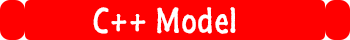
<style>
.page{position:relative;width:350px;height:40px;background:#ff0000}
.page>*{position:absolute;margin:0}
.t1{font:36px "SegoeMarker";color:#ffffff}
</style>
<div class="page">
<p class="t1" style="left:93px;top:7px;width:143px;height:27px">C++ Model</p>
</div>
